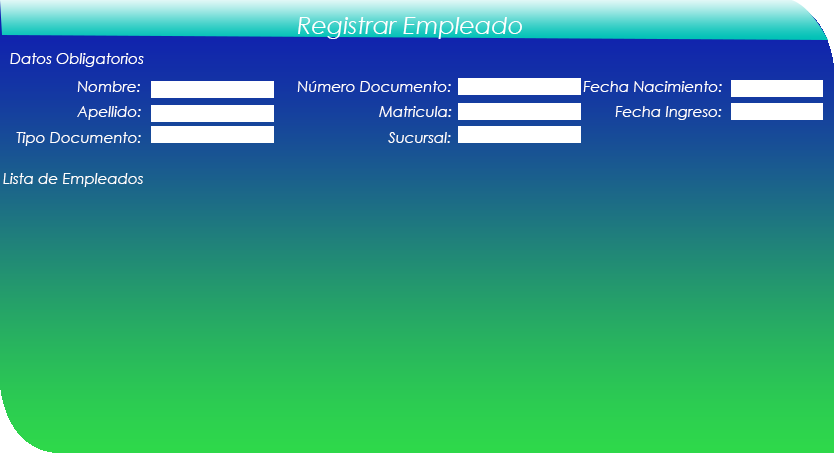
<style>
.page{position:relative;width:834px;height:453px}
.page>*{position:absolute;margin:0}
.t1{font:24px "CenturyGothic-Italic";color:#ffffff}
.t2{font:15px "CenturyGothic-Italic";color:#ffffff}
</style>
<div class="page">
<p class="t1" style="left:298px;top:17px;width:224px;height:22px">Registrar Empleado</p>
<p class="t2" style="left:10px;top:53px;width:134px;height:14px">Datos Obligatorios</p>
<p class="t2" style="left:77px;top:81px;width:63px;height:11px">Nombre:</p>
<p class="t2" style="left:297px;top:81px;width:154px;height:11px">Número Documento:</p>
<p class="t2" style="left:583px;top:81px;width:139px;height:11px">Fecha Nacimiento:</p>
<p class="t2" style="left:77px;top:106px;width:64px;height:14px">Apellido:</p>
<p class="t2" style="left:379px;top:106px;width:73px;height:11px">Matricula:</p>
<p class="t2" style="left:615px;top:106px;width:107px;height:14px">Fecha Ingreso:</p>
<p class="t2" style="left:16px;top:132px;width:125px;height:14px">Tipo Documento:</p>
<p class="t2" style="left:388px;top:132px;width:63px;height:11px">Sucursal:</p>
<p class="t2" style="left:3px;top:173px;width:140px;height:14px">Lista de Empleados</p>
</div>
